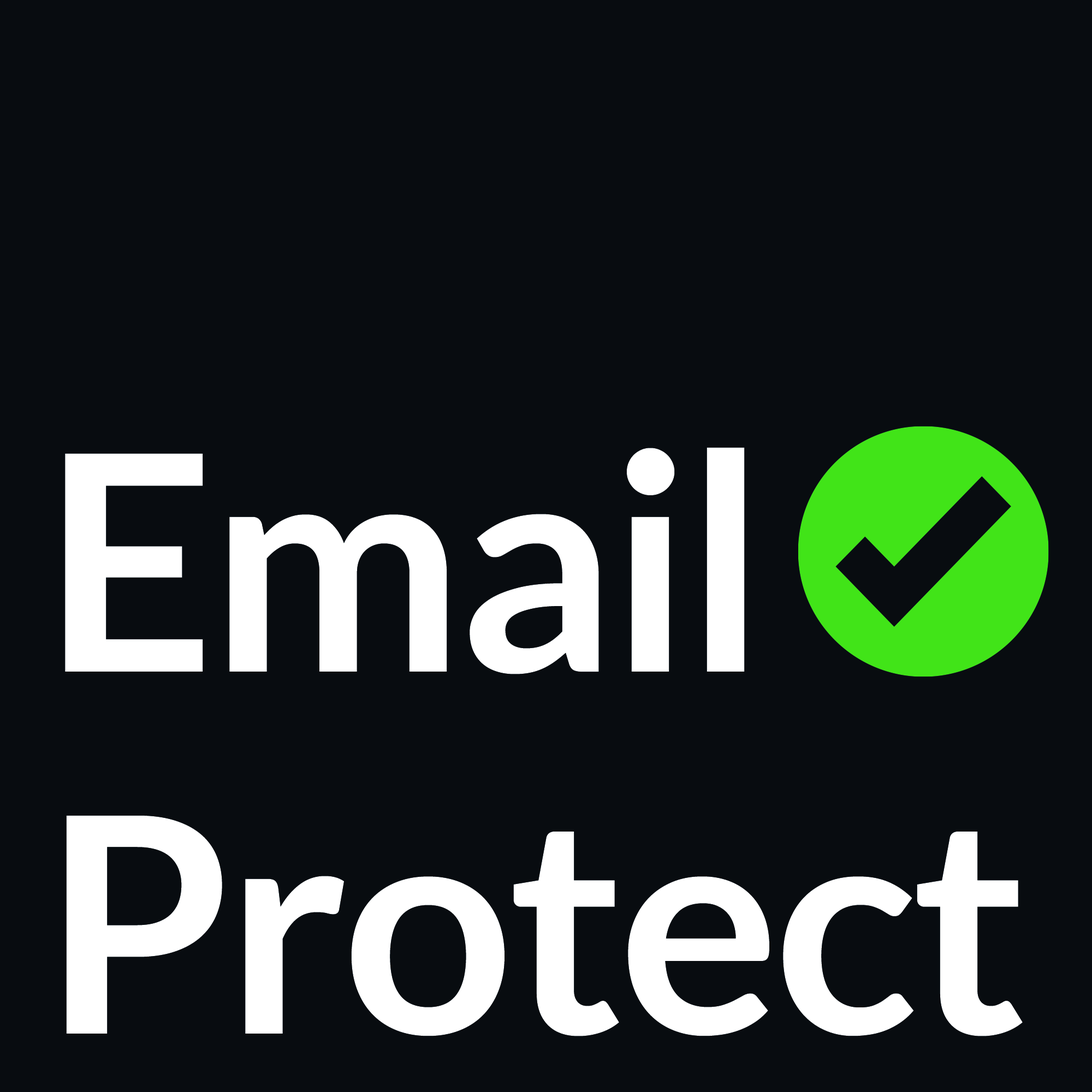
<style>
.page{position:relative;width:1092px;height:1092px;background:#080c10}
.page>*{position:absolute;margin:0}
.t1{font:301.4px "Lato-Bold";letter-spacing:-0.02em;color:#ffffff}
</style>
<div class="page">
<p class="t1" style="left:65px;top:447px;width:958px;height:589px">Email<br>Protect</p>
</div>
